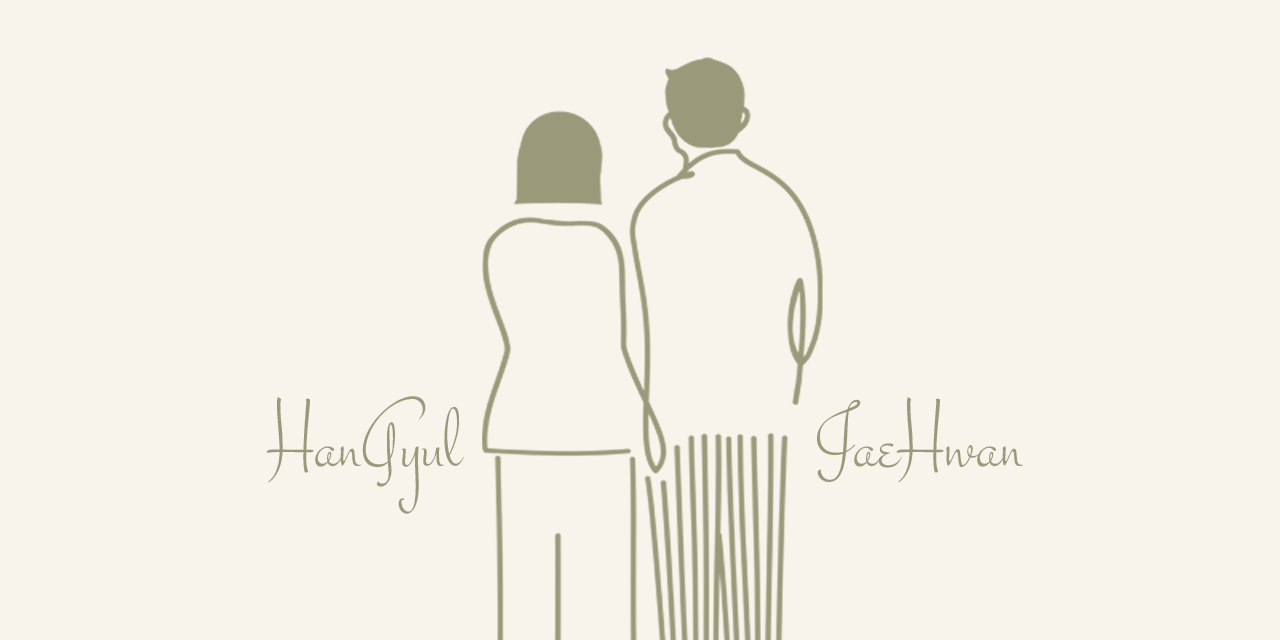
<style>
.page{position:relative;width:1280px;height:640px;background:#f8f4ec}
.page>*{position:absolute;margin:0}
.t1{font:95.2px "Stalemate-Regular";color:#9a9a7b}
</style>
<div class="page">
<p class="t1" style="left:266px;top:396px;width:757px;height:118px">HanGyul                      JaeHwan</p>
</div>
